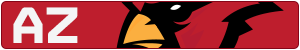
<style>
.page{position:relative;width:300px;height:50px;background:#be1e2d}
.page>*{position:absolute;margin:0}
.t1{font:50.8px "0Arame-Mono-Bold";color:#f4f5f6;scale:1.12 1}
</style>
<div class="page">
<p class="t1" style="left:13px;top:7px;width:65px;height:36px">AZ</p>
</div>
